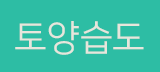
<style>
.page{position:relative;width:160px;height:72px;background:#2dbda4}
.page>*{position:absolute;margin:0}
.t1{font:36px "NanumSquareR";color:#e6e6dc}
</style>
<div class="page">
<p class="t1" style="left:15px;top:21px;width:129px;height:34px">토양습도</p>
</div>
